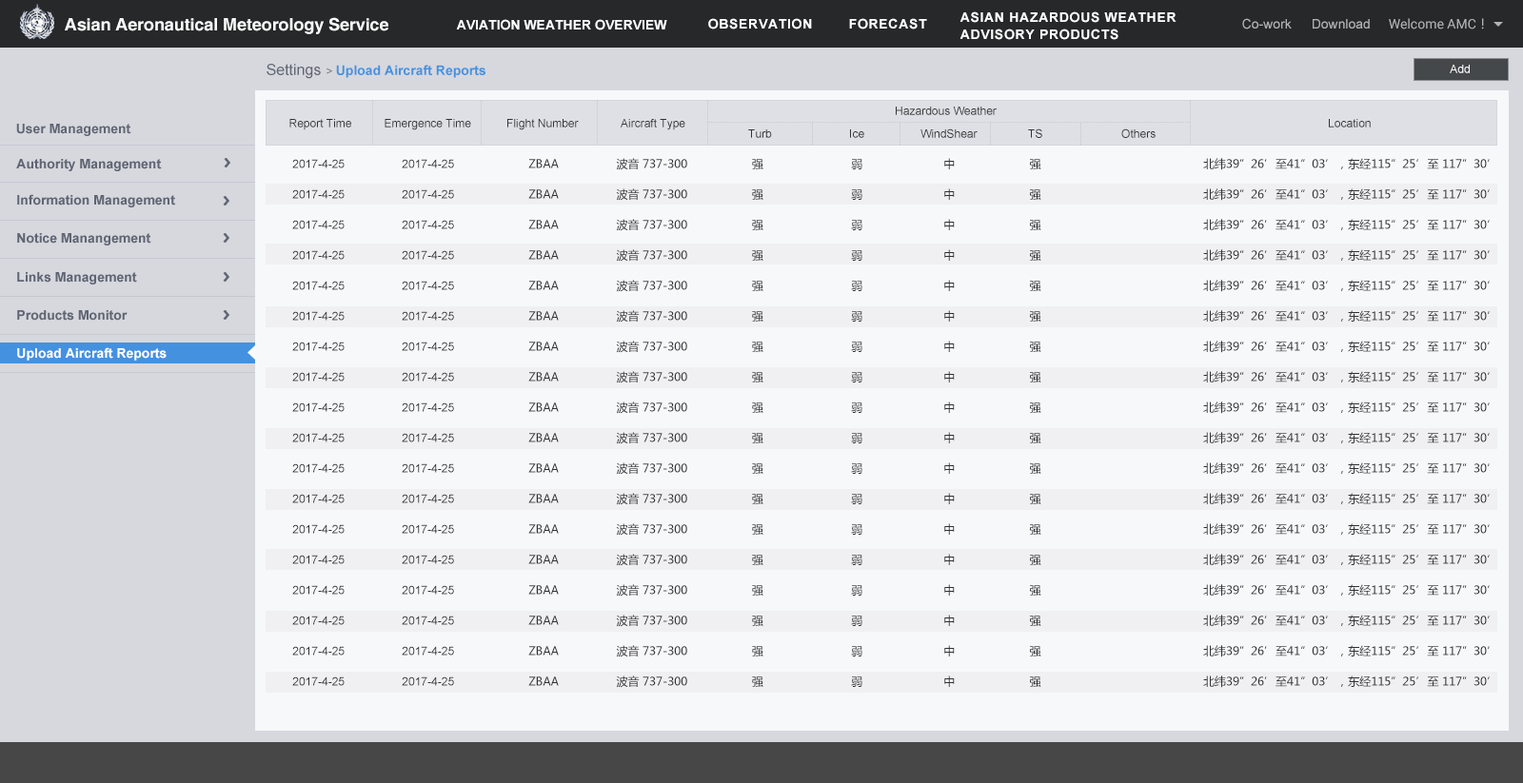
<style>
.page{position:relative;width:1523px;height:783px;background:#f7f8fa}
.page>*{position:absolute;margin:0}
.t1{font:17.1px "Helvetica-Bold";letter-spacing:-0.005em;color:#fafafa}
.t2{font:13.3px/17.1px "Arial-BoldMT";letter-spacing:0.05em;color:#ffffff}
.t3{font:13.3px "Arial-BoldMT";color:#ffffff}
.t4{font:13.3px "Arial-BoldMT";letter-spacing:0.05em;color:#ffffff}
.t5{font:13.3px "ArialMT";color:#b3b3b3}
.t6{font:13.3px "Roboto-Regular";color:#b3b3b3}
.t7{font:13.3px "MicrosoftYaHei";color:#b3b3b3}
.t8{font:13.3px "Arial-BoldMT";color:#4491e0}
.t9{font:15.2px "ArialMT";color:#606573}
.t10{font:11.4px "ArialMT";color:#606573}
.t11{font:11.4px "ArialMT";color:#ffffff}
.t12{font:11.4px "ArialMT";color:#333333}
.t13{font:13.3px "Arial-BoldMT";color:#606573}
.t14{font:11.4px "ArialMT";color:#313133}
.t15{font:11.4px/30.5px "MicrosoftYaHei";color:#313133}
.t16{font:11.4px/30.5px "ArialMT";color:#313133}
</style>
<div class="page">
<p class="t1" style="left:65px;top:17px;width:323px;height:17px">Asian Aeronautical Meteorology Service</p>
<p class="t2" style="left:959px;top:11px;width:217px;height:29px">ASIAN HAZARDOUS WEATHER<br>ADVISORY PRODUCTS</p>
<p class="t3" style="left:456px;top:19px;width:211px;height:11px">AVIATION WEATHER OVERVIEW</p>
<p class="t4" style="left:708px;top:18px;width:104px;height:11px">OBSERVATION</p>
<p class="t4" style="left:849px;top:18px;width:78px;height:11px">FORECAST</p>
<p class="t5" style="left:1242px;top:18px;width:49px;height:11px">Co-work</p>
<p class="t5" style="left:1312px;top:19px;width:57px;height:10px">Download</p>
<p class="t6" style="left:1388px;top:18px;width:96px;height:11px">Welcome AMC<span class="t7">！</span></p>
<p class="t8" style="left:266px;top:64px;width:219px;height:15px"><span class="t9">Settings </span><span class="t10">&gt; </span>Upload Aircraft Reports</p>
<p class="t11" style="left:1449px;top:65px;width:20px;height:8px">Add</p>
<p class="t12" style="left:895px;top:107px;width:101px;height:8px">Hazardous Weather</p>
<p class="t13" style="left:16px;top:124px;width:115px;height:12px">User Management</p>
<p class="t12" style="left:289px;top:119px;width:62px;height:11px">Report Time</p>
<p class="t12" style="left:384px;top:119px;width:87px;height:11px">Emergence Time</p>
<p class="t12" style="left:507px;top:119px;width:72px;height:11px">Flight Number</p>
<p class="t12" style="left:620px;top:119px;width:65px;height:11px">Aircraft Type</p>
<p class="t14" style="left:1328px;top:119px;width:42px;height:9px">Location</p>
<p class="t12" style="left:748px;top:129px;width:24px;height:9px">Turb</p>
<p class="t12" style="left:850px;top:129px;width:14px;height:9px">Ice</p>
<p class="t12" style="left:920px;top:128px;width:57px;height:10px">WindShear</p>
<p class="t14" style="left:1028px;top:128px;width:14px;height:10px">TS</p>
<p class="t14" style="left:1121px;top:128px;width:34px;height:10px">Others</p>
<p class="t13" style="left:16px;top:159px;width:146px;height:12px">Authority Management</p>
<p class="t15" style="left:292px;top:158px;width:1197px;height:530px"><span class="t16">        2017-4-25                 2017-4-25</span>                      ZBAA                 波音 737-300                   强                          弱                        中                      强                                                北纬39”26’至41”03’，东经115”25’至 117”30’<br> <span class="t16">       2017-4-25                 2017-4-25</span>                      ZBAA                 波音 737-300                   强                          弱                        中                      强                                                北纬39”26’至41”03’，东经115”25’至 117”30’<br> <span class="t16">       2017-4-25                 2017-4-25</span>                      ZBAA                 波音 737-300                   强                          弱                        中                      强                                                北纬39”26’至41”03’，东经115”25’至 117”30’<br> <span class="t16">       2017-4-25                 2017-4-25</span>                      ZBAA                 波音 737-300                   强                          弱                        中                      强                                                北纬39”26’至41”03’，东经115”25’至 117”30’<br> <span class="t16">       2017-4-25                 2017-4-25</span>                      ZBAA                 波音 737-300                   强                          弱                        中                      强                                                北纬39”26’至41”03’，东经115”25’至 117”30’<br> <span class="t16">       2017-4-25                 2017-4-25</span>                      ZBAA                 波音 737-300                   强                          弱                        中                      强                                                北纬39”26’至41”03’，东经115”25’至 117”30’<br> <span class="t16">       2017-4-25                 2017-4-25</span>                      ZBAA                 波音 737-300                   强                          弱                        中                      强                                                北纬39”26’至41”03’，东经115”25’至 117”30’<br> <span class="t16">       2017-4-25                 2017-4-25</span>                      ZBAA                 波音 737-300                   强                          弱                        中                      强                                                北纬39”26’至41”03’，东经115”25’至 117”30’<br> <span class="t16">       2017-4-25                 2017-4-25</span>                      ZBAA                 波音 737-300                   强                          弱                        中                      强                                                北纬39”26’至41”03’，东经115”25’至 117”30’<br> <span class="t16">       2017-4-25                 2017-4-25</span>                      ZBAA                 波音 737-300                   强                          弱                        中                      强                                                北纬39”26’至41”03’，东经115”25’至 117”30’<br> <span class="t16">       2017-4-25                 2017-4-25</span>                      ZBAA                 波音 737-300                   强                          弱                        中                      强                                                北纬39”26’至41”03’，东经115”25’至 117”30’<br> <span class="t16">       2017-4-25                 2017-4-25</span>                      ZBAA                 波音 737-300                   强                          弱                        中                      强                                                北纬39”26’至41”03’，东经115”25’至 117”30’<br> <span class="t16">       2017-4-25                 2017-4-25</span>                      ZBAA                 波音 737-300                   强                          弱                        中                      强                                                北纬39”26’至41”03’，东经115”25’至 117”30’<br> <span class="t16">       2017-4-25                 2017-4-25</span>                      ZBAA                 波音 737-300                   强                          弱                        中                      强                                                北纬39”26’至41”03’，东经115”25’至 117”30’<br> <span class="t16">       2017-4-25                 2017-4-25</span>                      ZBAA                 波音 737-300                   强                          弱                        中                      强                                                北纬39”26’至41”03’，东经115”25’至 117”30’<br> <span class="t16">       2017-4-25                 2017-4-25</span>                      ZBAA                 波音 737-300                   强                          弱                        中                      强                                                北纬39”26’至41”03’，东经115”25’至 117”30’<br> <span class="t16">       2017-4-25                 2017-4-25</span>                      ZBAA                 波音 737-300                   强                          弱                        中                      强                                                北纬39”26’至41”03’，东经115”25’至 117”30’<br> <span class="t16">       2017-4-25                 2017-4-25</span>                      ZBAA                 波音 737-300                   强                          弱                        中                      强                                                北纬39”26’至41”03’，东经115”25’至 117”30’</p>
<p class="t13" style="left:17px;top:194px;width:158px;height:13px">Information Management</p>
<p class="t13" style="left:17px;top:233px;width:134px;height:13px">Notice Manangement</p>
<p class="t13" style="left:17px;top:272px;width:120px;height:13px">Links Management</p>
<p class="t13" style="left:17px;top:310px;width:111px;height:11px">Products Monitor</p>
<p class="t3" style="left:17px;top:347px;width:150px;height:14px">Upload Aircraft Reports</p>
</div>
